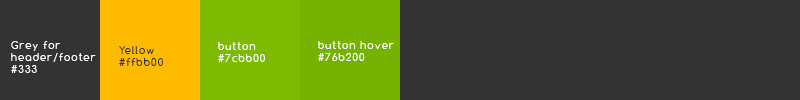
<style>
.page{position:relative;width:800px;height:100px;background:#333333}
.page>*{position:absolute;margin:0}
.t1{font:10px "Comfortaa";letter-spacing:0.11em;color:#ffffff}
.t2{font:10px "Comfortaa";letter-spacing:0.11em;color:#333333}
</style>
<div class="page">
<p class="t1" style="left:11px;top:41px;width:85px;height:32px">Grey for<br>header/footer<br>#333</p>
<p class="t1" style="left:318px;top:41px;width:76px;height:20px">button hover<br>#76b200</p>
<p class="t2" style="left:119px;top:46px;width:44px;height:20px">Yellow<br>#ffbb00</p>
<p class="t1" style="left:218px;top:42px;width:47px;height:20px">button<br>#7cbb00</p>
</div>
